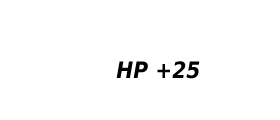
<style>
.page{position:relative;width:280px;height:120px;background:#ffffff}
.page>*{position:absolute;margin:0}
.t1{font:22.5px "DejaVuSansCondensed-BoldOblique";color:#020202}
</style>
<div class="page">
<p class="t1" style="left:116px;top:61px;width:84px;height:18px">HP +25</p>
</div>
